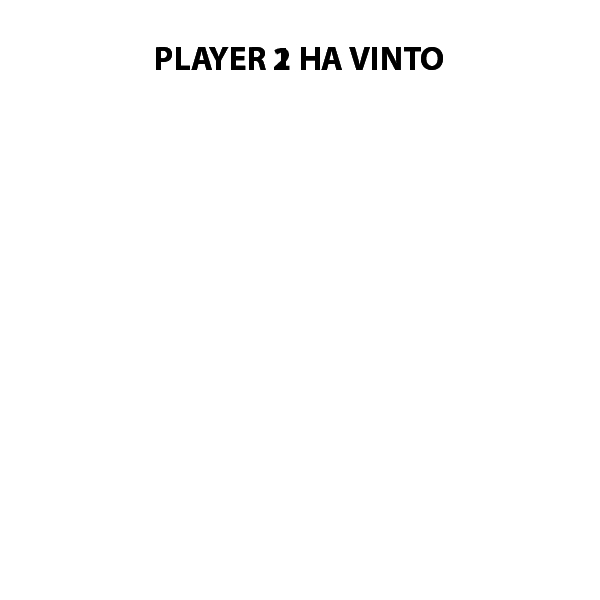
<style>
.page{position:relative;width:600px;height:600px;background:#ffffff}
.page>*{position:absolute;margin:0}
.t1{font:33.3px "MyriadPro-Bold";color:#000000}
</style>
<div class="page">
<p class="t1" style="left:156px;top:47px;width:287px;height:23px">PLAYER 1 HA VINTO</p>
<p class="t1" style="left:156px;top:47px;width:287px;height:23px">PLAYER 2 HA VINTO</p>
</div>
